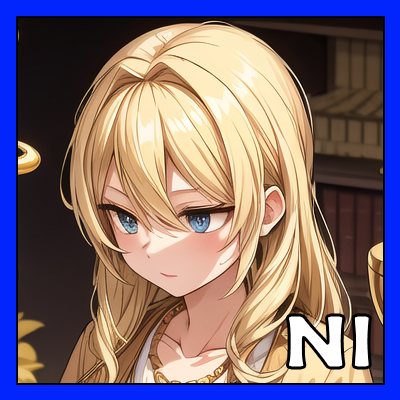
<style>
.page{position:relative;width:400px;height:400px}
.page>*{position:absolute;margin:0}
.t1{font:74.2px "YetR-HM";color:#ffffff;font-weight:bold;scale:1.33 1}
</style>
<div class="page">
<p class="t1" style="left:287px;top:315px;width:84px;height:53px">Nl</p>
</div>
